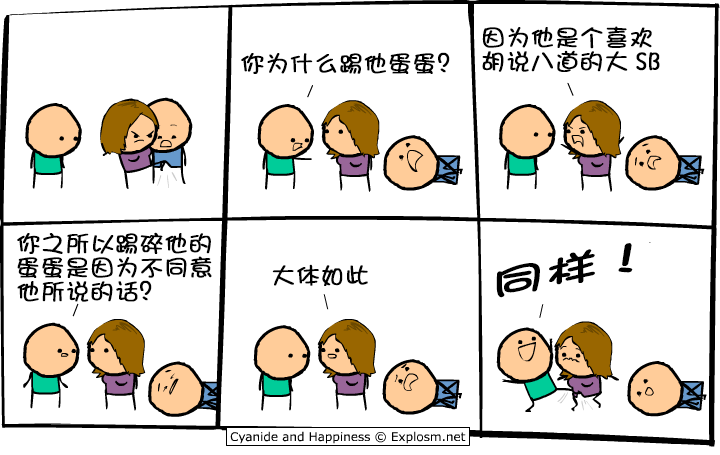
<style>
.page{position:relative;width:720px;height:455px;background:#ffffff}
.page>*{position:absolute;margin:0}
.t1{font:24px/24px "DFShaoNvW5";color:#000000;font-weight:bold}
.t2{font:24px "DFShaoNvW5";color:#000000;font-weight:bold}
.t3{font:35.8px "DFShaoNvW5";color:#000000;font-weight:bold;scale:1.49 1}
</style>
<div class="page">
<p class="t1" style="left:482px;top:26px;width:178px;height:46px">因为他是个喜欢<br>胡说八道的大SB</p>
<p class="t2" style="left:241px;top:52px;width:209px;height:22px">你为什么踢他蛋蛋？</p>
<p class="t1" style="left:17px;top:232px;width:195px;height:70px">你之所以踢碎他的<br>蛋蛋是因为不同意<br>他所说的话？</p>
<p class="t3" style="left:496px;top:243px;width:137px;height:55px;rotate:-11deg">同样！</p>
<p class="t2" style="left:272px;top:264px;width:96px;height:22px">大体如此</p>
</div>
